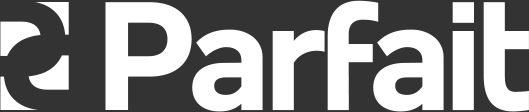
<style>
.page{position:relative;width:529px;height:112px;background:#333333}
.page>*{position:absolute;margin:0}
.t1{font:158.5px "MollenPersonalUse-Bold";letter-spacing:-0.05em;color:#ffffff}
</style>
<div class="page">
<p class="t1" style="left:105px;top:0px;width:424px;height:112px">Parfait</p>
</div>
